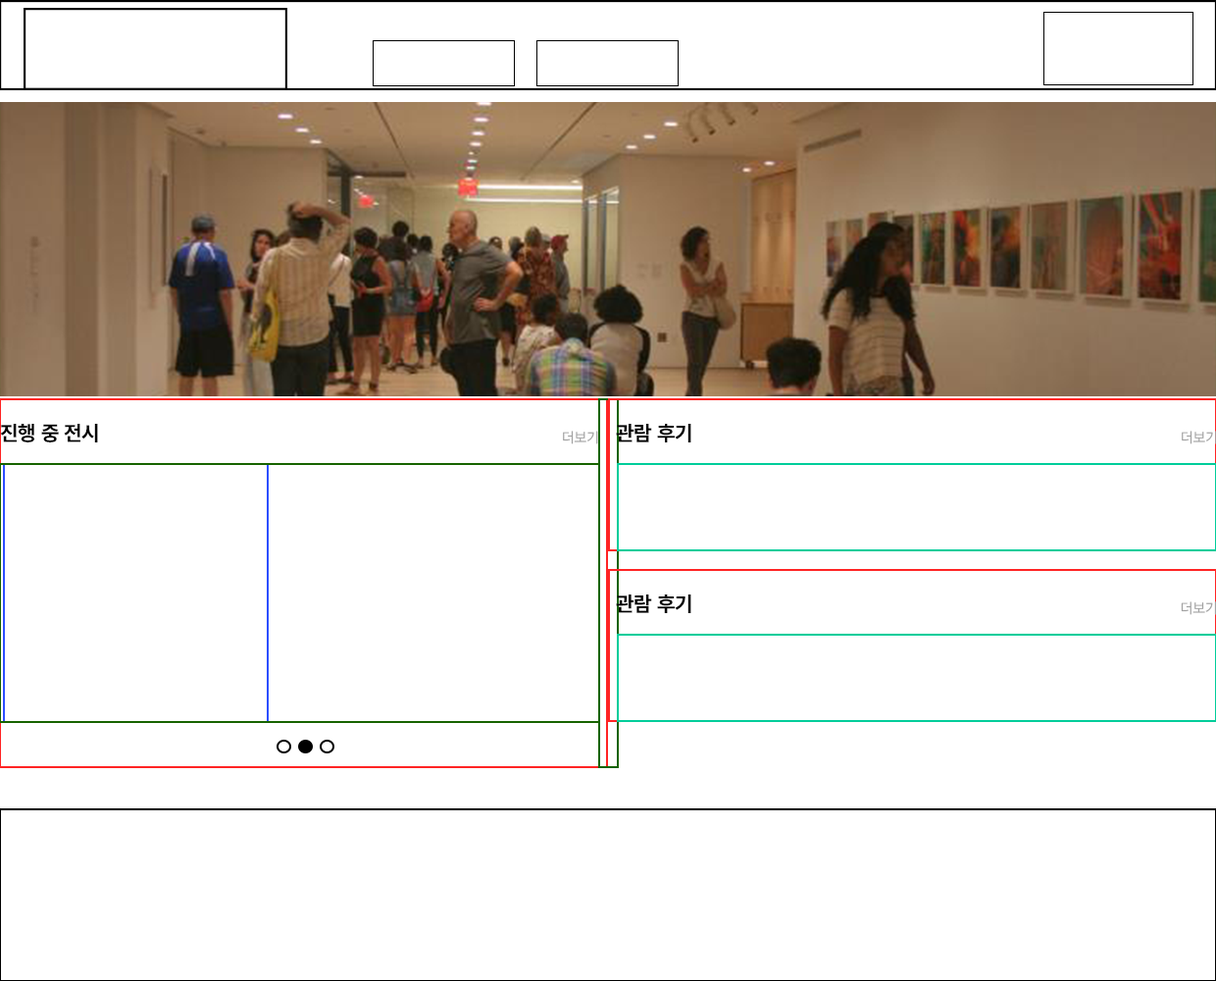
<style>
.page{position:relative;width:1216px;height:981px;background:#ffffff}
.page>*{position:absolute;margin:0}
.t1{font:20.9px "Pretendard-Bold";color:#000000}
.t2{font:14.4px "PretendardVariable-Regular";color:#a2a2a2}
</style>
<div class="page">
<p class="t1" style="left:0px;top:424px;width:98px;height:18px">진행 중 전시</p>
<p class="t1" style="left:616px;top:424px;width:75px;height:18px">관람 후기</p>
<p class="t2" style="left:563px;top:430px;width:35px;height:14px">더보기</p>
<p class="t2" style="left:1182px;top:430px;width:35px;height:14px">더보기</p>
<p class="t1" style="left:616px;top:594px;width:75px;height:19px">관람 후기</p>
<p class="t2" style="left:1181px;top:601px;width:36px;height:14px">더보기</p>
</div>
